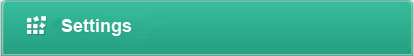
<style>
.page{position:relative;width:414px;height:56px}
.page>*{position:absolute;margin:0}
.t1{font:18px "Arial-BoldMT";color:#fdfdfd}
</style>
<div class="page">
<p class="t1" style="left:61px;top:19px;width:71px;height:17px">Settings</p>
</div>
